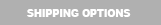
<style>
.page{position:relative;width:161px;height:25px;background:#b0b0b0}
.page>*{position:absolute;margin:0}
.t1{font:18.2px "Arial-Black";color:#ffffff;scale:0.9 1}
</style>
<div class="page">
<p class="t1" style="left:27px;top:9px;width:104px;height:8px">SHIPPING OPTIONS</p>
</div>
